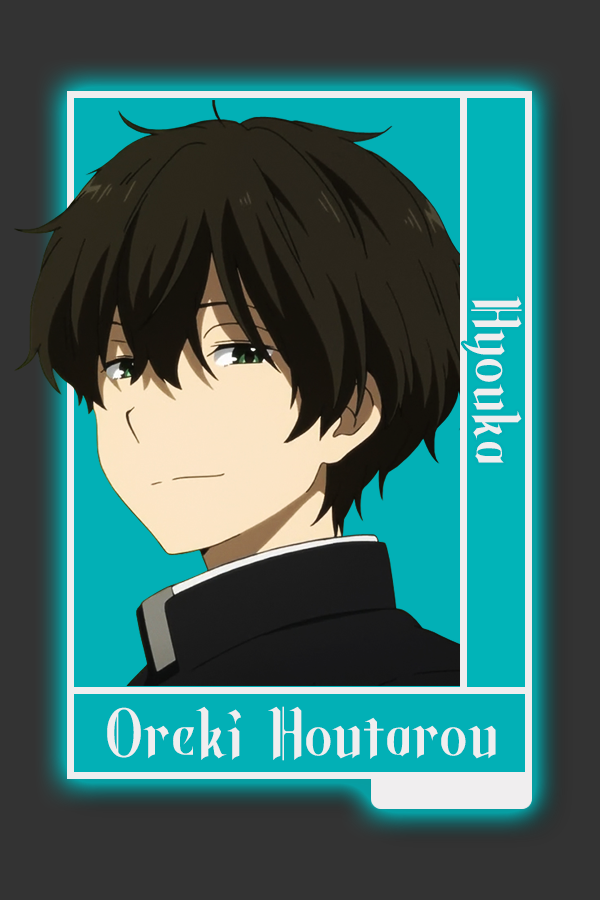
<style>
.page{position:relative;width:600px;height:900px;background:#333333}
.page>*{position:absolute;margin:0}
.t1{font:70.1px "Hangyaku";color:#f0eeef}
.t2{font:75px "Hangyaku";color:#f0eeef}
</style>
<div class="page">
<p class="t1" style="left:463px;top:296px;width:59px;height:167px;rotate:90deg">Hyouka</p>
<p class="t2" style="left:107px;top:706px;width:389px;height:55px">Oreki Houtarou</p>
</div>
